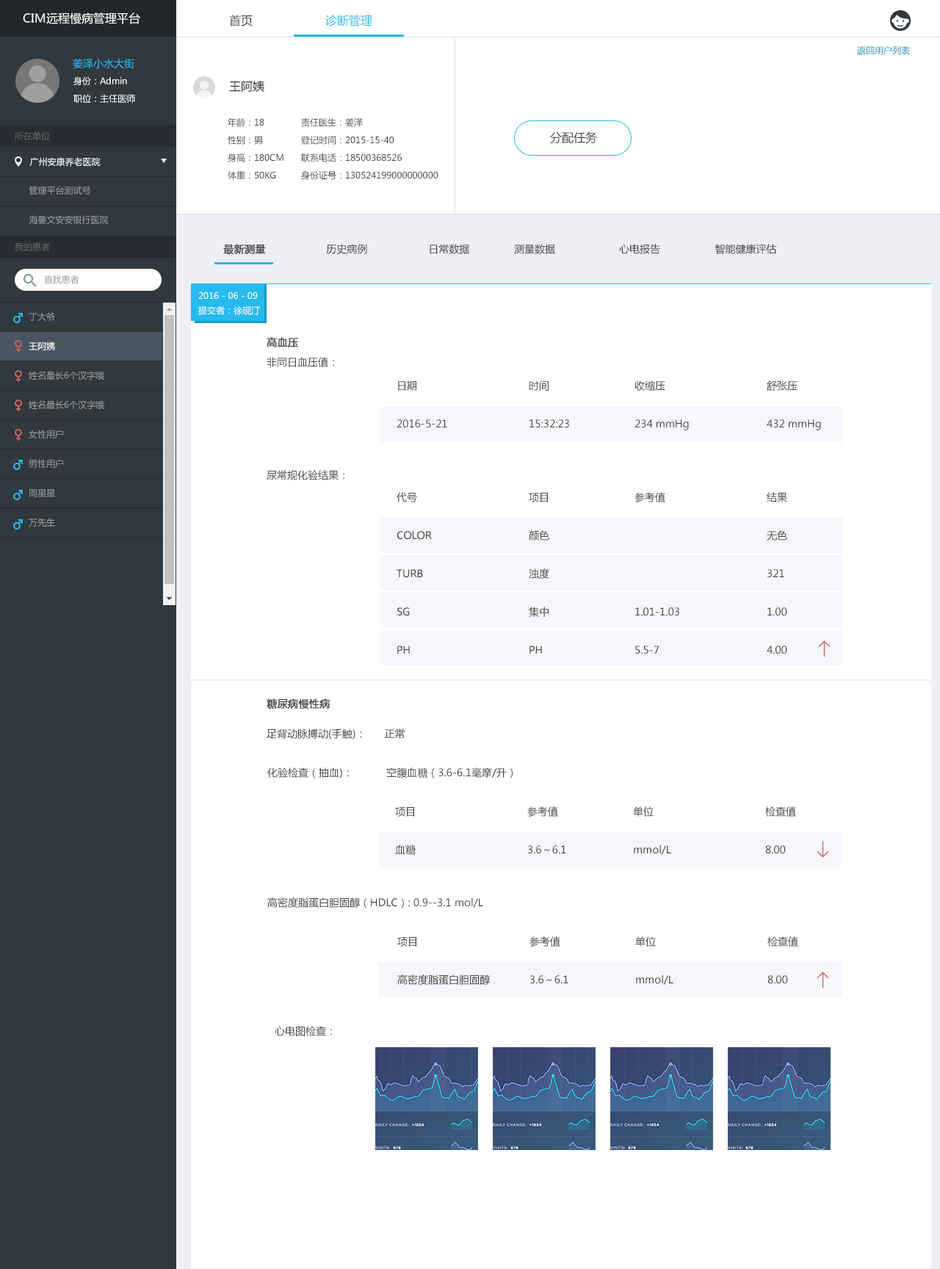
<style>
.page{position:relative;width:940px;height:1269px;background:#ffffff}
.page>*{position:absolute;margin:0}
.t1{font:11.7px "MicrosoftYaHei";color:#ffffff}
.t2{font:11.7px "MicrosoftYaHei";color:#434343}
.t3{font:11.7px "MicrosoftYaHei";color:#26bbef}
.t4{font:8.8px "MicrosoftYaHei";color:#1790ba}
.t5{font:10.3px "MicrosoftYaHei";color:#26bbef}
.t6{font:8.8px "MicrosoftYaHei";color:#ffffff}
.t7{font:11.7px "MicrosoftYaHei";color:#333333}
.t8{font:8.8px/17.6px "MicrosoftYaHei";color:#434343}
.t9{font:8.8px "MicrosoftYaHei";color:#666666}
.t10{font:8.8px "MicrosoftYaHei";color:#999999}
.t11{font:10.3px "MicrosoftYaHei";color:#434343}
.t12{font:10.3px "MicrosoftYaHei";color:#434343;font-weight:bold}
.t13{font:8.8px/14.7px "MicrosoftYaHei";color:#ffffff}
.t14{font:8.8px/14.7px "MicrosoftYaHei";color:#999999}
</style>
<div class="page">
<p class="t1" style="left:23px;top:12px;width:117px;height:12px">CIM远程慢病管理平台</p>
<p class="t2" style="left:229px;top:15px;width:24px;height:11px">首页</p>
<p class="t3" style="left:325px;top:15px;width:47px;height:11px">诊断管理</p>
<p class="t4" style="left:857px;top:46px;width:53px;height:9px">返回用户列表</p>
<p class="t5" style="left:73px;top:58px;width:61px;height:11px">姜泽小水大街</p>
<p class="t6" style="left:73px;top:76px;width:54px;height:9px">身份：Admin</p>
<p class="t7" style="left:229px;top:81px;width:35px;height:11px">王阿姨</p>
<p class="t6" style="left:73px;top:94px;width:62px;height:9px">职位：主任医师</p>
<p class="t8" style="left:228px;top:118px;width:55px;height:62px">年龄：18 <br>性别：男<br>身高：180CM<br>体重：50KG</p>
<p class="t8" style="left:301px;top:118px;width:137px;height:62px">责任医生：姜泽<br>登记时间：2015-15-40<br>联系电话：18500368526<br>身份证号：130524199000000000</p>
<p class="t9" style="left:15px;top:131px;width:35px;height:9px">所在单位</p>
<p class="t2" style="left:550px;top:131px;width:47px;height:13px">分配任务</p>
<p class="t6" style="left:29px;top:157px;width:72px;height:10px">广州安康养老医院</p>
<p class="t10" style="left:29px;top:186px;width:62px;height:9px">管理平台测试号</p>
<p class="t10" style="left:29px;top:215px;width:80px;height:9px">海曼文安安银行医院</p>
<p class="t9" style="left:15px;top:242px;width:35px;height:9px">我的患者</p>
<p class="t11" style="left:223px;top:244px;width:554px;height:11px"><span class="t12">最新测量</span>                    历史病例                    日常数据  测量数据                     心电报告                  智能健康评估</p>
<p class="t10" style="left:44px;top:275px;width:35px;height:9px">查找患者</p>
<p class="t13" style="left:198px;top:291px;width:62px;height:24px">2016 - 06 - 09<br>提交者：徐砚汀</p>
<p class="t14" style="left:29px;top:312px;width:75px;height:215px">丁大爷<br><br><span class="t13">王阿姨<br></span><br>姓名最长6个汉字哦<br><br>姓名最长6个汉字哦<br><br>女性用户<br><br>男性用户<br><br>周星星<br><br>万先生<br><br>男女图表请区分<br><br>男性用户<br><br>男性用户<br><br>女性用户<br><br>工程师</p>
<p class="t12" style="left:267px;top:337px;width:31px;height:10px">高血压</p>
<p class="t11" style="left:267px;top:357px;width:67px;height:10px">非同日血压值：</p>
<p class="t11" style="left:398px;top:380px;width:399px;height:11px">日期     时间    收缩压    舒张压</p>
<p class="t11" style="left:396px;top:419px;width:425px;height:11px">2016-5-21    15:32:23   234 mmHg   432 mmHg</p>
<p class="t11" style="left:267px;top:470px;width:77px;height:10px">尿常规化验结果：</p>
<p class="t11" style="left:396px;top:492px;width:391px;height:10px">代号     项目    参考值    结果</p>
<p class="t11" style="left:396px;top:530px;width:391px;height:10px">COLOR    颜色          无色</p>
<p class="t11" style="left:396px;top:568px;width:388px;height:11px">TURB    浊度          321</p>
<p class="t11" style="left:397px;top:606px;width:390px;height:11px">SG     集中    1.01-1.03    1.00</p>
<p class="t11" style="left:397px;top:645px;width:390px;height:9px">PH     PH    5.5-7     4.00</p>
<p class="t12" style="left:267px;top:698px;width:63px;height:11px">糖尿病慢性病</p>
<p class="t11" style="left:267px;top:728px;width:138px;height:11px">足背动脉搏动(手触)：     正常</p>
<p class="t11" style="left:267px;top:767px;width:246px;height:11px">化验检查（抽血)：           空腹血糖（3.6-6.1毫摩/升）</p>
<p class="t11" style="left:395px;top:806px;width:401px;height:10px">项目     参考值   单位     检查值</p>
<p class="t11" style="left:395px;top:844px;width:391px;height:11px">血糖     3.6～6.1   mmol/L    8.00</p>
<p class="t11" style="left:267px;top:897px;width:216px;height:11px">高密度脂蛋白胆固醇（HDLC）: 0.9--3.1 mol/L</p>
<p class="t11" style="left:397px;top:936px;width:401px;height:10px">项目     参考值   单位     检查值</p>
<p class="t11" style="left:397px;top:974px;width:391px;height:11px">高密度脂蛋白胆固醇  3.6～6.1   mmol/L    8.00</p>
<p class="t11" style="left:275px;top:1026px;width:57px;height:10px">心电图检查：</p>
</div>
